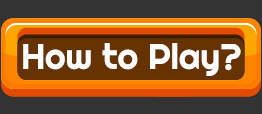
<style>
.page{position:relative;width:262px;height:114px;background:#333333}
.page>*{position:absolute;margin:0}
.t1{font:35.3px "Righteous-Regular";color:#ffffff}
</style>
<div class="page">
<p class="t1" style="left:23px;top:43px;width:218px;height:33px">How to Play?</p>
</div>
